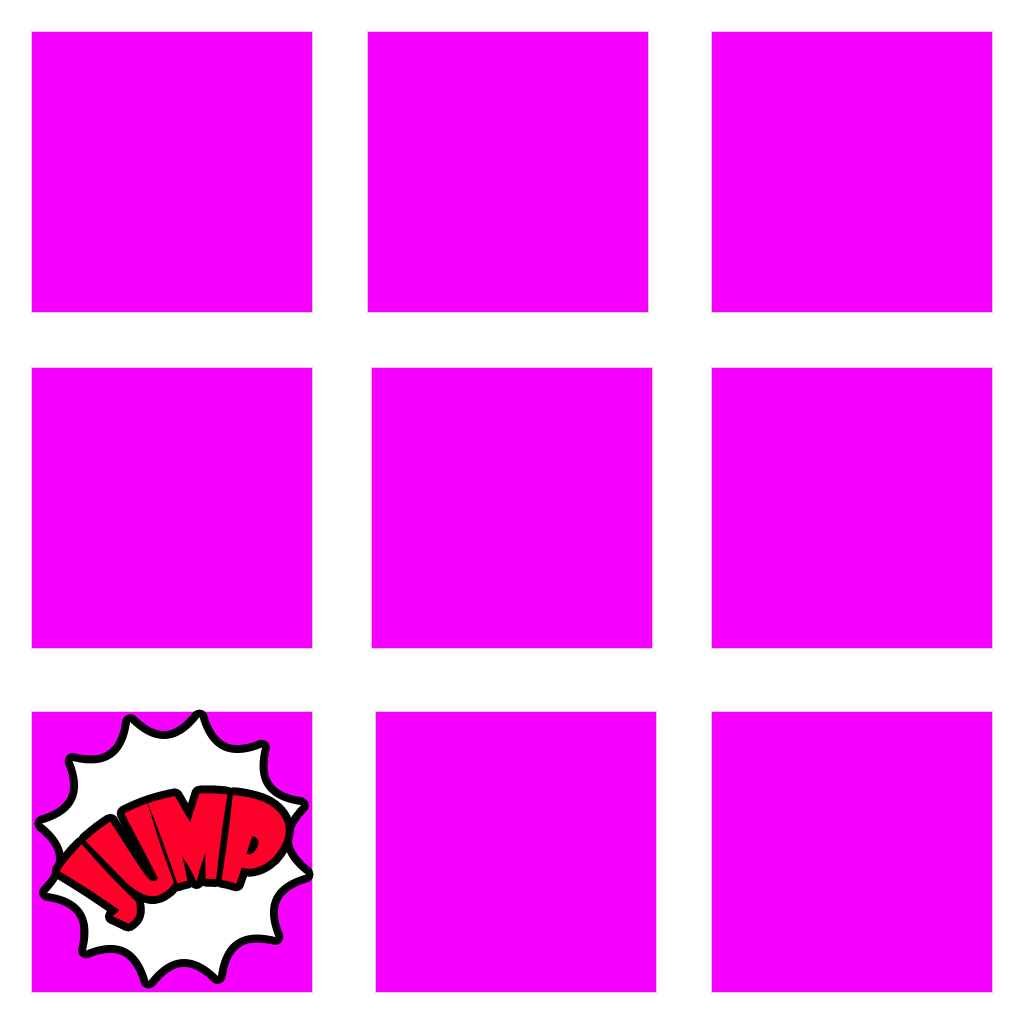
<style>
.page{position:relative;width:1024px;height:1024px;background:#f600ff}
.page>*{position:absolute;margin:0}
.t1{font:112.5px "ShowcardGothic-Reg";color:#ff002a;scale:0.33 1}
</style>
<div class="page">
<p class="t1" style="left:59px;top:793px;width:227px;height:131px;rotate:-14deg">Jump</p>
</div>
